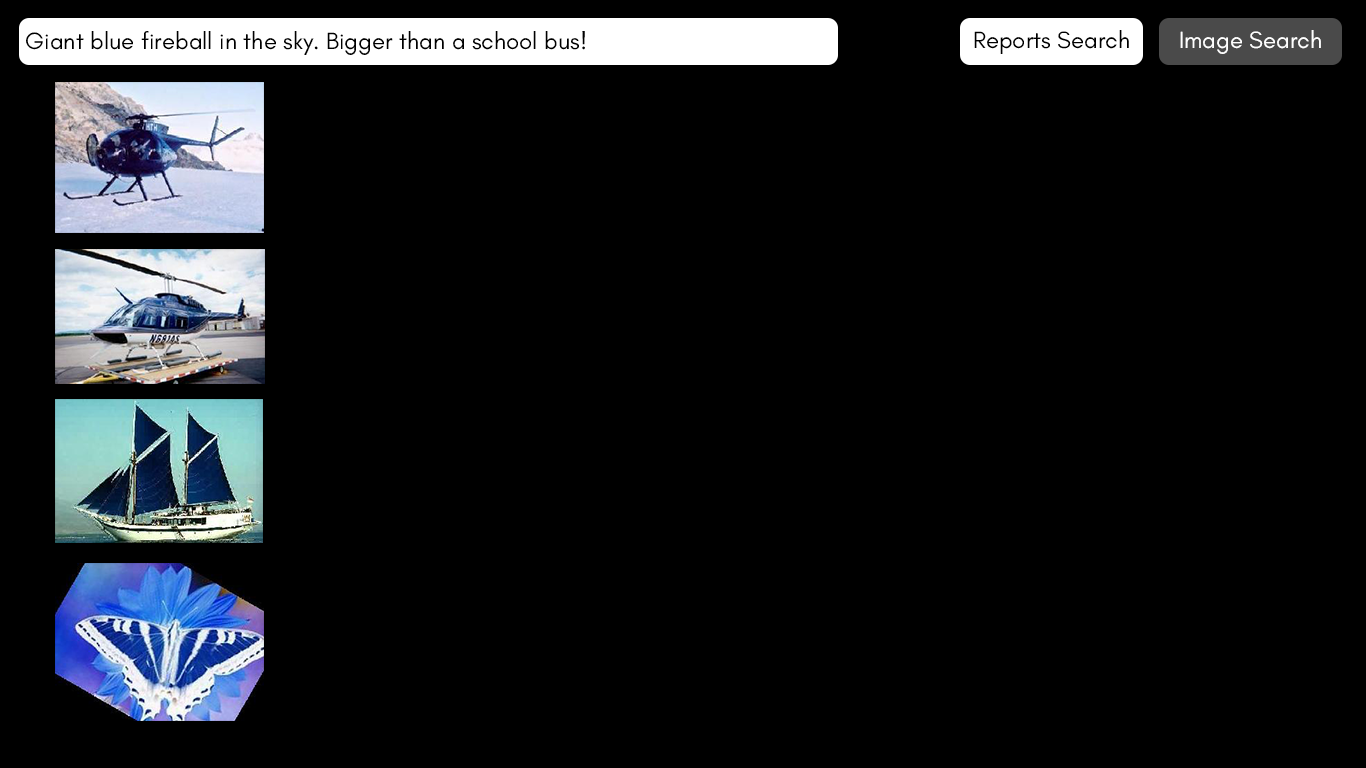
<style>
.page{position:relative;width:1366px;height:768px;background:#000000}
.page>*{position:absolute;margin:0}
.t1{font:24px "GlacialIndifference-Regular";color:#000000}
.t2{font:24px "GlacialIndifference-Regular";color:#ffffff}
</style>
<div class="page">
<p class="t1" style="left:974px;top:30px;width:155px;height:24px">Reports Search</p>
<p class="t2" style="left:1180px;top:30px;width:141px;height:24px">Image Search</p>
<p class="t1" style="left:26px;top:31px;width:559px;height:24px">Giant blue fireball in the sky. Bigger than a school bus!</p>
</div>
